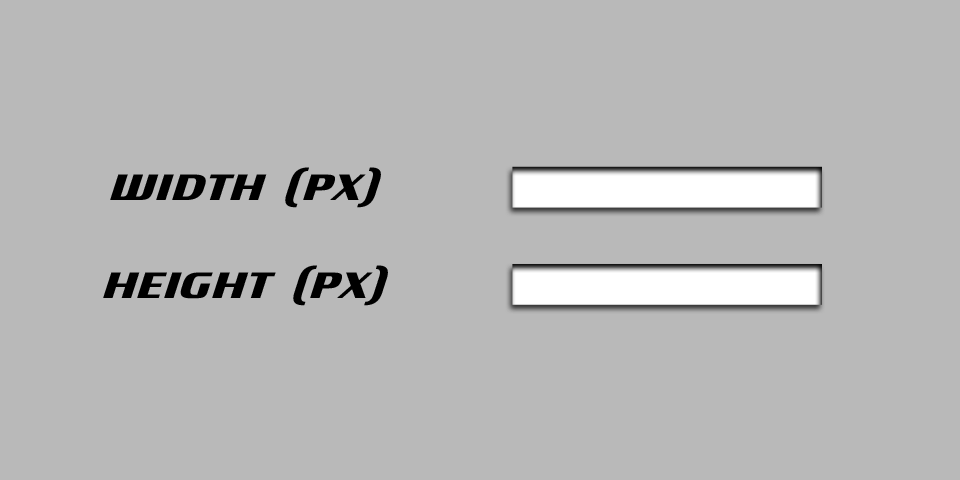
<style>
.page{position:relative;width:960px;height:480px;background:#b9b9b9}
.page>*{position:absolute;margin:0}
.t1{font:57.6px "Motorwerk";color:#000000}
</style>
<div class="page">
<p class="t1" style="left:110px;top:167px;width:271px;height:41px">width (px)</p>
<p class="t1" style="left:103px;top:265px;width:285px;height:41px">Height (px)</p>
</div>
